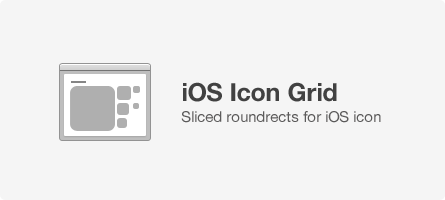
<style>
.page{position:relative;width:445px;height:200px;background:#f5f5f5}
.page>*{position:absolute;margin:0}
.t1{font:25px "HelveticaNeue-Bold";color:#414141}
.t2{font:15px "HelveticaNeue";color:#5c5b5b}
</style>
<div class="page">
<p class="t1" style="left:183px;top:82px;width:154px;height:20px">iOS Icon Grid</p>
<p class="t2" style="left:181px;top:111px;width:200px;height:12px">Sliced roundrects for iOS icon</p>
</div>
